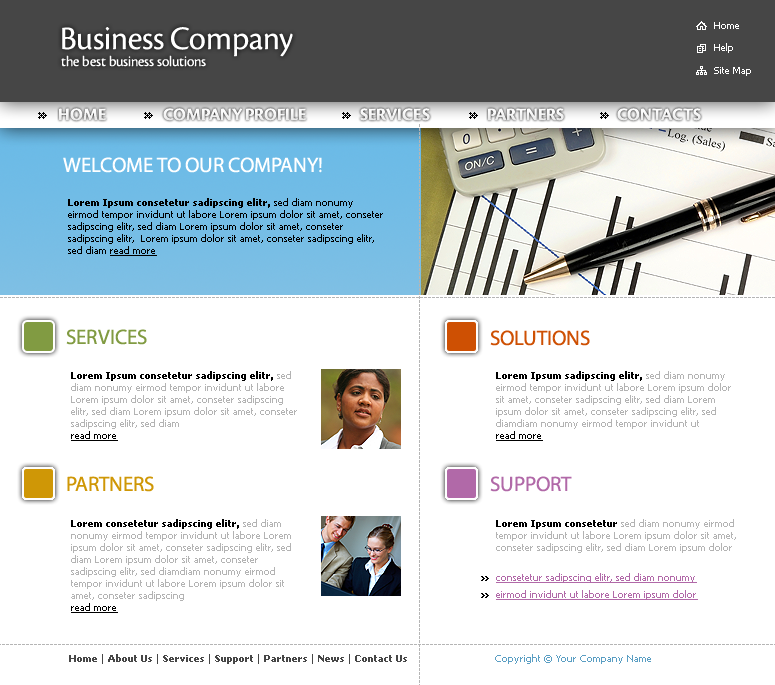
<style>
.page{position:relative;width:775px;height:685px;background:#ffffff}
.page>*{position:absolute;margin:0}
.t1{font:34px "CronosPro-Disp";color:#ffffff}
.t2{font:10px "Tahoma";color:#ffffff}
.t3{font:15px "CronosPro-Disp";color:#ffffff}
.t4{font:18px "CronosPro-BoldSubh";color:#ffffff}
.t5{font:21px "MyriadPro-Regular";color:#ffffff;text-transform:uppercase}
.t6{font:10px "Tahoma";color:#000000}
.t7{font:10px "Tahoma-Bold";color:#000000}
.t8{font:10px "Tahoma";color:#000000;text-decoration:underline}
.t9{font:21px "MyriadPro-Regular";color:#819b42;text-transform:uppercase}
.t10{font:21px "MyriadPro-Regular";color:#ce5003;text-transform:uppercase}
.t11{font:10px "Tahoma";color:#b3b3b3}
.t12{font:21px "MyriadPro-Regular";color:#cf9706;text-transform:uppercase}
.t13{font:21px "MyriadPro-Regular";color:#b169a8;text-transform:uppercase}
.t14{font:10px/16.3px "Tahoma";color:#b169a8;text-decoration:underline}
.t15{font:10px "Tahoma-Bold";color:#464646}
.t16{font:10px "Tahoma";color:#464646}
.t17{font:10px "Tahoma";color:#5a9ec3}
</style>
<div class="page">
<p class="t1" style="left:62px;top:27px;width:231px;height:30px">Business Company</p>
<p class="t2" style="left:714px;top:22px;width:25px;height:7px">Home</p>
<p class="t2" style="left:714px;top:43px;width:19px;height:10px">Help</p>
<p class="t3" style="left:61px;top:55px;width:145px;height:12px">the best business solutions</p>
<p class="t2" style="left:714px;top:67px;width:37px;height:9px">Site Map</p>
<p class="t4" style="left:59px;top:108px;width:48px;height:13px">HOME</p>
<p class="t4" style="left:163px;top:108px;width:144px;height:13px">COMPANY PROFILE</p>
<p class="t4" style="left:360px;top:108px;width:70px;height:13px">SERVICES</p>
<p class="t4" style="left:488px;top:108px;width:76px;height:13px">PARTNERS</p>
<p class="t4" style="left:617px;top:108px;width:84px;height:13px">CONTACTS</p>
<p class="t5" style="left:63px;top:157px;width:259px;height:16px">welcome to our company!</p>
<p class="t6" style="left:68px;top:198px;width:315px;height:58px"><span class="t7">Lorem Ipsum consetetur sadipscing elitr,</span> sed diam nonumy eirmod tempor invidunt ut labore Lorem ipsum dolor sit amet, conseter sadipscing elitr, sed diam Lorem ipsum dolor sit amet, conseter sadipscing elitr,  Lorem ipsum dolor sit amet, conseter sadipscing elitr, sed diam <span class="t8">read more</span></p>
<p class="t9" style="left:66px;top:329px;width:81px;height:16px">services</p>
<p class="t10" style="left:490px;top:330px;width:100px;height:16px">solutions</p>
<p class="t11" style="left:71px;top:371px;width:226px;height:70px"><span class="t7">Lorem Ipsum consetetur sadipscing elitr,</span> sed diam nonumy eirmod tempor invidunt ut labore Lorem ipsum dolor sit amet, conseter sadipscing elitr, sed diam Lorem ipsum dolor sit amet, conseter sadipscing elitr, sed diam<br><span class="t8">read more</span></p>
<p class="t11" style="left:496px;top:371px;width:235px;height:70px"><span class="t7">Lorem Ipsum sadipscing elitr,</span> sed diam nonumy eirmod tempor invidunt ut labore Lorem ipsum dolor sit amet, conseter sadipscing elitr, sed diam Lorem ipsum dolor sit amet, conseter sadipscing elitr, sed diamdiam nonumy eirmod tempor invidunt ut <br><span class="t8">read more</span></p>
<p class="t12" style="left:67px;top:476px;width:87px;height:16px">partners</p>
<p class="t13" style="left:490px;top:476px;width:82px;height:16px">support</p>
<p class="t11" style="left:71px;top:519px;width:220px;height:94px"><span class="t7">Lorem consetetur sadipscing elitr,</span> sed diam nonumy eirmod tempor invidunt ut labore Lorem ipsum dolor sit amet, conseter sadipscing elitr, sed diam Lorem ipsum dolor sit amet, conseter sadipscing elitr, sed diamdiam nonumy eirmod tempor invidunt ut labore Lorem ipsum dolor sit amet, conseter sadipscing <br><span class="t8">read more</span></p>
<p class="t11" style="left:496px;top:519px;width:240px;height:34px"><span class="t7">Lorem Ipsum consetetur</span> sed diam nonumy eirmod tempor invidunt ut labore Lorem ipsum dolor sit amet, conseter sadipscing elitr, sed diam Lorem ipsum dolor</p>
<p class="t14" style="left:496px;top:573px;width:202px;height:27px">consetetur sadipscing elitr, sed diam nonumy eirmod invidunt ut labore Lorem ipsum dolor</p>
<p class="t15" style="left:69px;top:654px;width:338px;height:10px"><span class="t16">  </span>Home <span class="t16">| </span>About Us <span class="t16">| </span>Services <span class="t16">| </span>Support <span class="t16">| </span>Partners <span class="t16">| </span>News <span class="t16">| </span>Contact Us</p>
<p class="t17" style="left:495px;top:654px;width:156px;height:10px">Copyright © Your Company Name</p>
</div>
